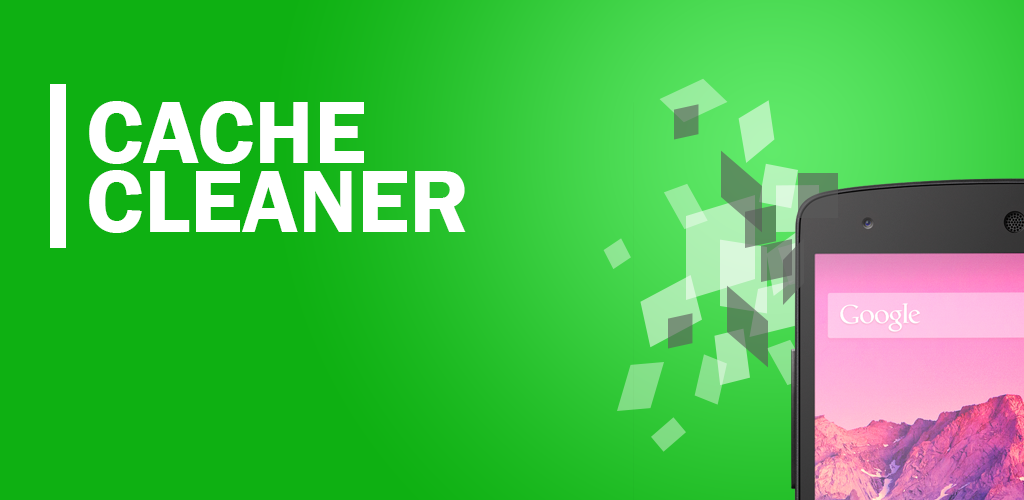
<style>
.page{position:relative;width:1024px;height:500px;background:#0eb012}
.page>*{position:absolute;margin:0}
.t1{font:91.7px/68.8px "FranklinGothic-Demi";color:#ffffff}
</style>
<div class="page">
<p class="t1" style="left:89px;top:101px;width:377px;height:132px">CACHE<br>CLEANER</p>
</div>
